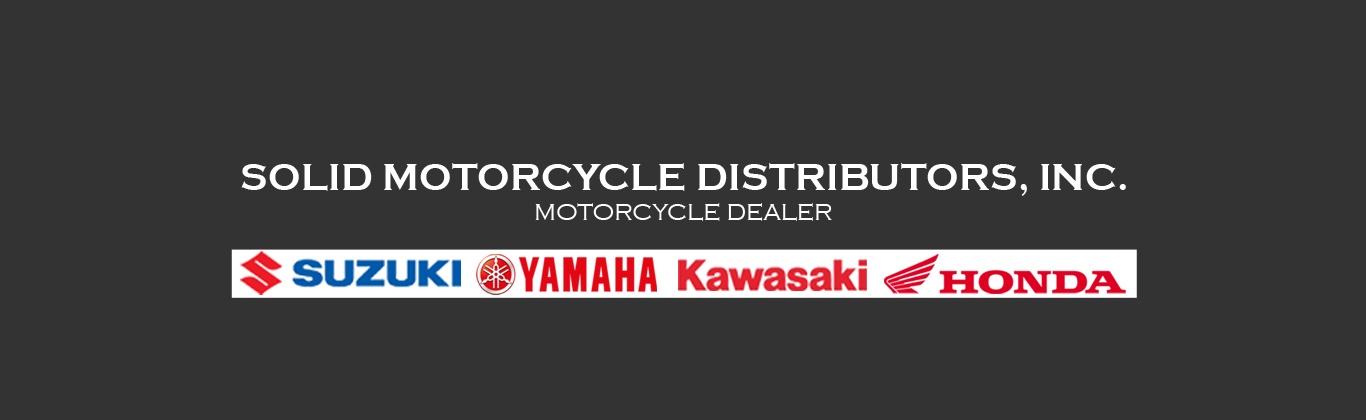
<style>
.page{position:relative;width:1366px;height:420px;background:#333333}
.page>*{position:absolute;margin:0}
.t1{font:39.1px "CopperplateGothic-Bold";color:#ffffff}
.t2{font:23.8px "CopperplateGothic-Light";color:#ffffff}
</style>
<div class="page">
<p class="t1" style="left:241px;top:163px;width:885px;height:33px">SOLID MOTORCYCLE DISTRIBUTORS, INC.</p>
<p class="t2" style="left:535px;top:203px;width:297px;height:18px">MOTORCYCLE DEALER</p>
</div>
